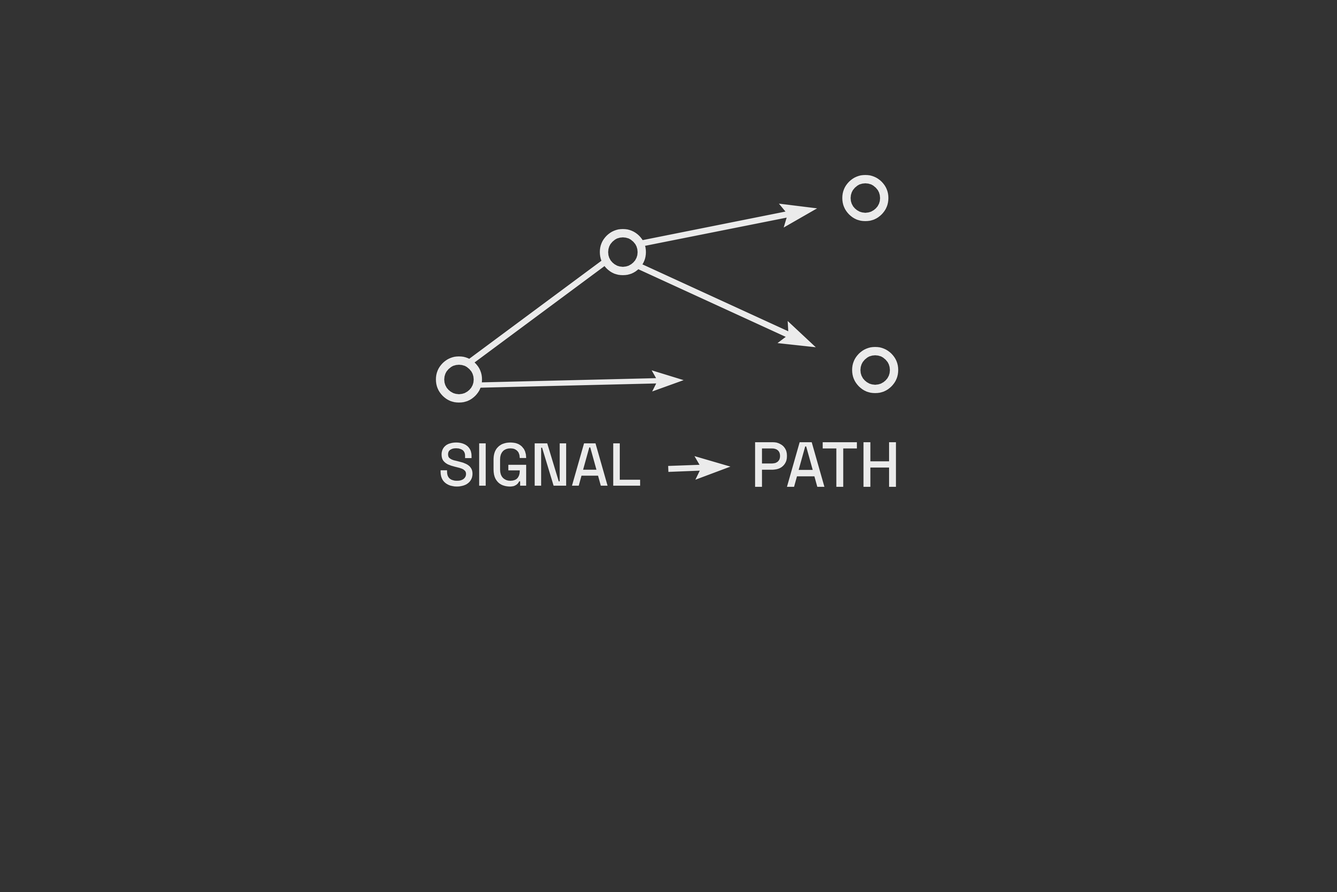
<style>
.page{position:relative;width:1337px;height:892px;background:#333333}
.page>*{position:absolute;margin:0}
.t1{font:60.4px "SpaceGroteskLight-Medium";color:#ebebeb}
.t2{font:63.7px "SpaceGroteskLight-Medium";color:#ebebeb}
</style>
<div class="page">
<p class="t1" style="left:441px;top:442px;width:199px;height:45px">SIGNAL</p>
<p class="t2" style="left:755px;top:442px;width:142px;height:45px">PATH</p>
</div>
